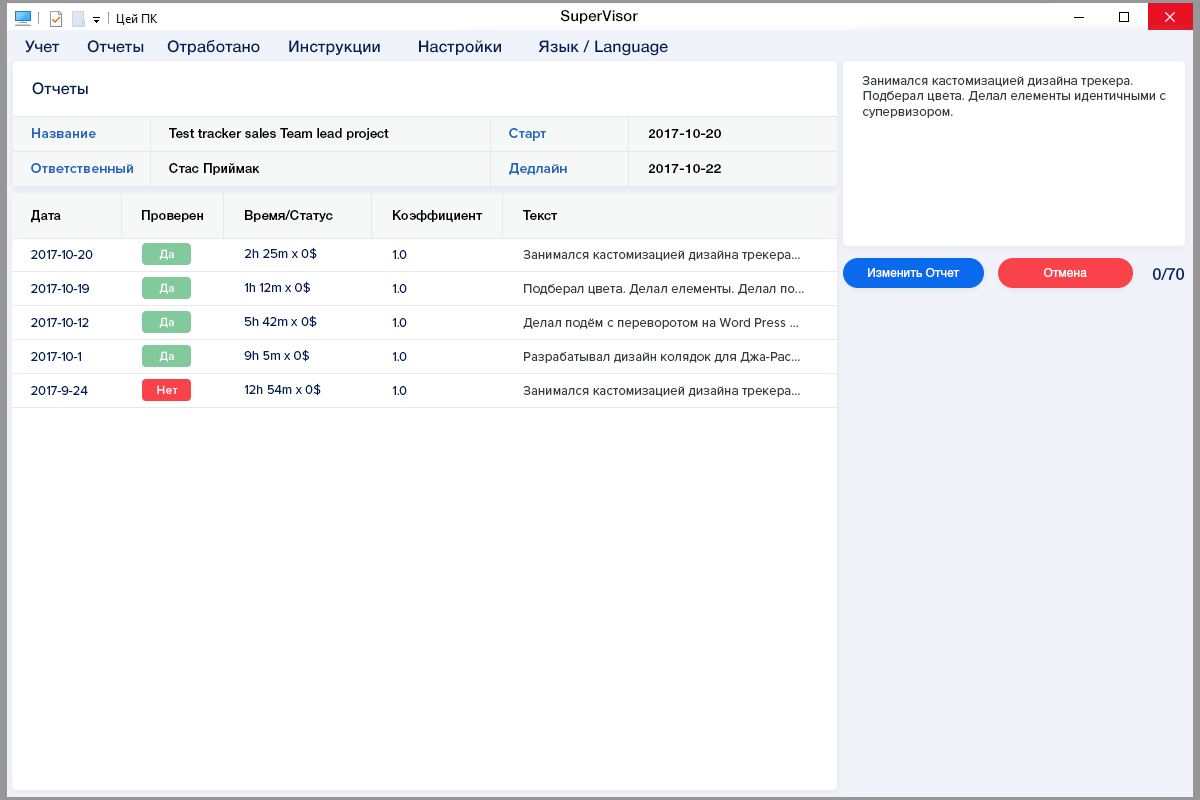
<style>
.page{position:relative;width:1200px;height:800px;background:#ffffff}
.page>*{position:absolute;margin:0}
.t1{font:15px "HelveticaNeueCyr-Medium";letter-spacing:0.01em;color:#000000}
.t2{font:16px "HelveticaNeueCyr-Medium";letter-spacing:0.01em;color:#002157}
.t3{font:13px "ProximaNova-Regular";letter-spacing:0.01em;color:#393b45}
.t4{font:14px "ProximaNova-Semibold";letter-spacing:0.01em;color:#2066bc}
.t5{font:13px "HelveticaNeueCyr-Medium";letter-spacing:0.01em;color:#000000}
.t6{font:13px "HelveticaNeueCyr-Medium";letter-spacing:0.01em;color:#000000;scale:1.06 1}
.t7{font:13px "ProximaNova-Regular";color:#002157}
.t8{font:12px "ProximaNova-Semibold";letter-spacing:0.02em;color:#ffffff}
.t9{font:12px "HelveticaNeueCyr-Roman";letter-spacing:0.01em;color:#ffffff}
.t10{font:16px "HelveticaNeueCyr-Medium";color:#002157}
</style>
<div class="page">
<p class="t1" style="left:561px;top:10px;width:77px;height:14px">SuperVisor</p>
<p class="t2" style="left:25px;top:40px;width:643px;height:16px">Учет      Отчеты     Отработано      Инструкции        Настройки        Язык / Language</p>
<p class="t3" style="left:862px;top:76px;width:304px;height:42px">Занимался кастомизацией дизайна трекера. Подберал цвета. Делал елементы идентичными с супервизором.</p>
<p class="t2" style="left:32px;top:82px;width:56px;height:13px">Отчеты</p>
<p class="t4" style="left:32px;top:128px;width:64px;height:10px">Название</p>
<p class="t5" style="left:169px;top:128px;width:220px;height:12px">Test tracker sales Team lead project</p>
<p class="t4" style="left:509px;top:128px;width:37px;height:13px">Старт</p>
<p class="t6" style="left:648px;top:129px;width:73px;height:9px">2017-10-20</p>
<p class="t4" style="left:31px;top:163px;width:102px;height:10px">Ответственный</p>
<p class="t5" style="left:169px;top:163px;width:91px;height:12px">Стас Приймак</p>
<p class="t4" style="left:509px;top:163px;width:58px;height:12px">Дедлайн</p>
<p class="t6" style="left:648px;top:164px;width:73px;height:9px">2017-10-22</p>
<p class="t5" style="left:31px;top:210px;width:30px;height:13px">Дата</p>
<p class="t5" style="left:142px;top:210px;width:61px;height:12px">Проверен</p>
<p class="t5" style="left:245px;top:210px;width:88px;height:12px">Время/Статус</p>
<p class="t5" style="left:393px;top:210px;width:90px;height:13px">Коэффициент</p>
<p class="t5" style="left:523px;top:210px;width:35px;height:10px">Текст</p>
<p class="t7" style="left:31px;top:250px;width:62px;height:9px">2017-10-20</p>
<p class="t8" style="left:159px;top:249px;width:15px;height:11px">Да</p>
<p class="t7" style="left:244px;top:247px;width:73px;height:13px">2h 25m x 0$</p>
<p class="t7" style="left:392px;top:250px;width:15px;height:9px">1.0</p>
<p class="t3" style="left:523px;top:250px;width:277px;height:11px">Занимался кастомизацией дизайна трекера...</p>
<p class="t9" style="left:868px;top:268px;width:92px;height:9px">Изменить Отчет</p>
<p class="t9" style="left:1044px;top:268px;width:43px;height:9px">Отмена</p>
<p class="t10" style="left:1152px;top:268px;width:33px;height:12px">0/70</p>
<p class="t7" style="left:244px;top:281px;width:66px;height:13px">1h 12m x 0$</p>
<p class="t7" style="left:31px;top:284px;width:58px;height:9px">2017-10-19</p>
<p class="t8" style="left:159px;top:283px;width:15px;height:11px">Да</p>
<p class="t7" style="left:392px;top:284px;width:15px;height:9px">1.0</p>
<p class="t3" style="left:524px;top:284px;width:280px;height:11px">Подберал цвета. Делал елементы. Делал по...</p>
<p class="t7" style="left:31px;top:318px;width:58px;height:9px">2017-10-12</p>
<p class="t8" style="left:159px;top:317px;width:15px;height:11px">Да</p>
<p class="t7" style="left:244px;top:315px;width:73px;height:13px">5h 42m x 0$</p>
<p class="t7" style="left:392px;top:318px;width:15px;height:9px">1.0</p>
<p class="t3" style="left:523px;top:318px;width:275px;height:11px">Делал подём с переворотом на Word Press ...</p>
<p class="t7" style="left:31px;top:352px;width:50px;height:9px">2017-10-1</p>
<p class="t8" style="left:159px;top:351px;width:15px;height:11px">Да</p>
<p class="t7" style="left:244px;top:349px;width:65px;height:13px">9h 5m x 0$</p>
<p class="t7" style="left:392px;top:352px;width:15px;height:9px">1.0</p>
<p class="t3" style="left:524px;top:352px;width:276px;height:11px">Разрабатывал дизайн колядок для Джа-Рас...</p>
<p class="t7" style="left:31px;top:386px;width:57px;height:9px">2017-9-24</p>
<p class="t8" style="left:157px;top:385px;width:21px;height:9px">Нет</p>
<p class="t7" style="left:244px;top:383px;width:77px;height:13px">12h 54m x 0$</p>
<p class="t7" style="left:392px;top:386px;width:15px;height:9px">1.0</p>
<p class="t3" style="left:523px;top:386px;width:277px;height:11px">Занимался кастомизацией дизайна трекера...</p>
</div>
